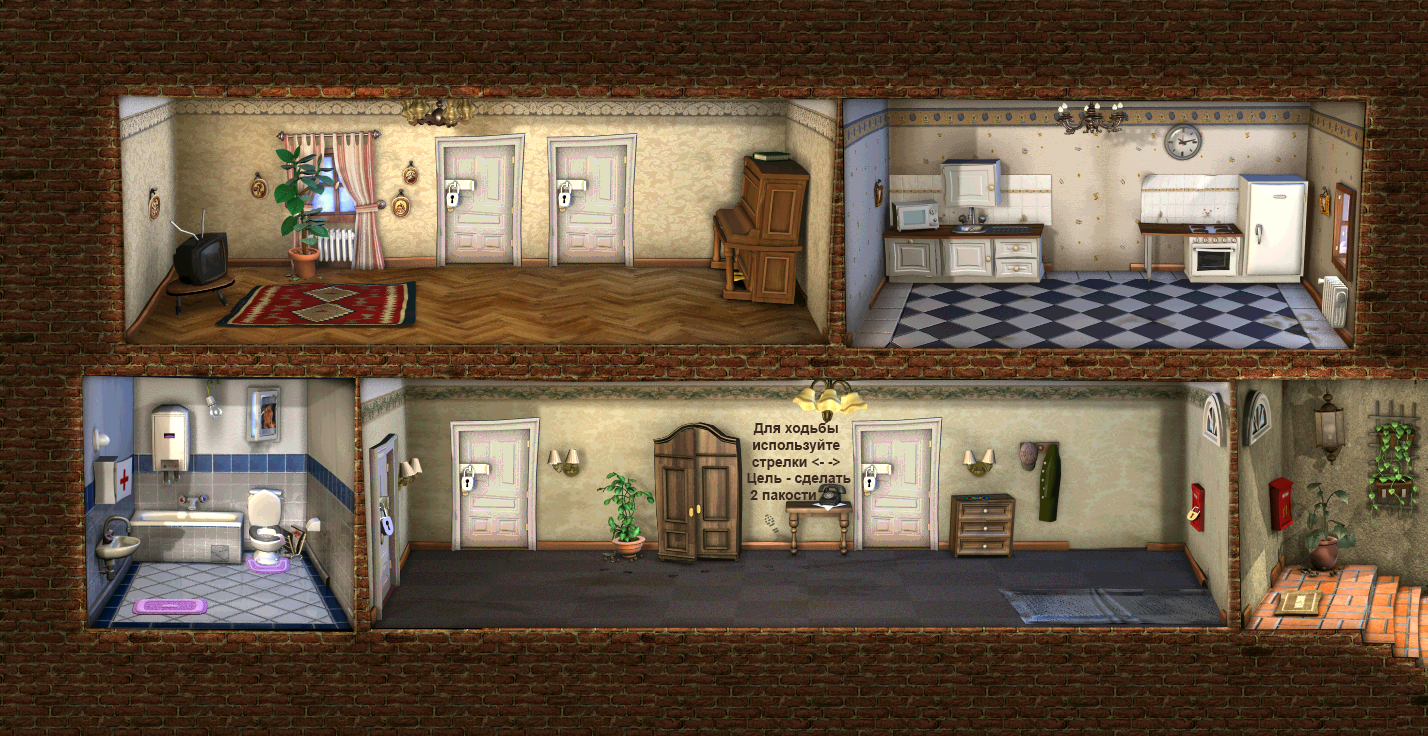
<style>
.page{position:relative;width:1428px;height:736px}
.page>*{position:absolute;margin:0}
.t1{font:14px "Arial-BoldMT";color:#3b2821}
</style>
<div class="page">
<p class="t1" style="left:747px;top:423px;width:104px;height:77px;text-align:center">Для ходьбы используйте стрелки &lt;- -&gt;<br>   Цель - сделать         <br>    2 пакости</p>
</div>
